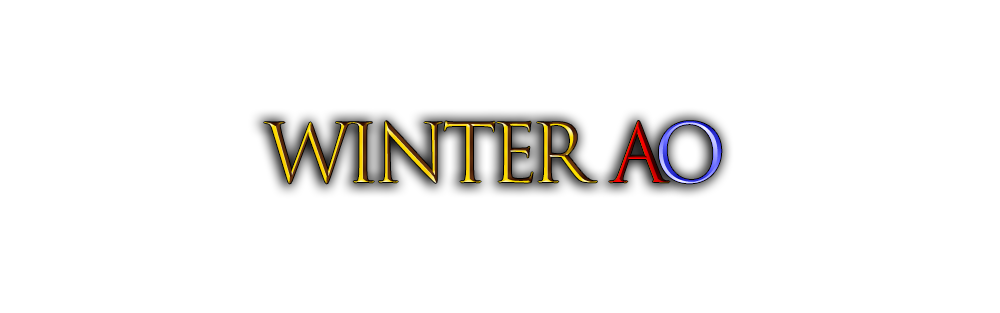
<style>
.page{position:relative;width:1000px;height:313px;background:#ffffff}
.page>*{position:absolute;margin:0}
.t1{font:78.9px "TrajanColor-Concept";letter-spacing:-0.08em}
</style>
<div class="page">
<p class="t1" style="left:264px;top:121px;width:333px;height:63px">Winter</p>
<p class="t1" style="left:609px;top:121px;width:61px;height:62px">a</p>
<p class="t1" style="left:659px;top:121px;width:63px;height:63px">o</p>
</div>
